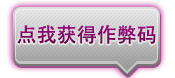
<style>
.page{position:relative;width:175px;height:78px}
.page>*{position:absolute;margin:0}
.t1{font:20px "AdobeHeitiStd-Regular";color:#830564}
</style>
<div class="page">
<p class="t1" style="left:17px;top:25px;width:139px;height:19px">点我获得作弊码</p>
</div>
